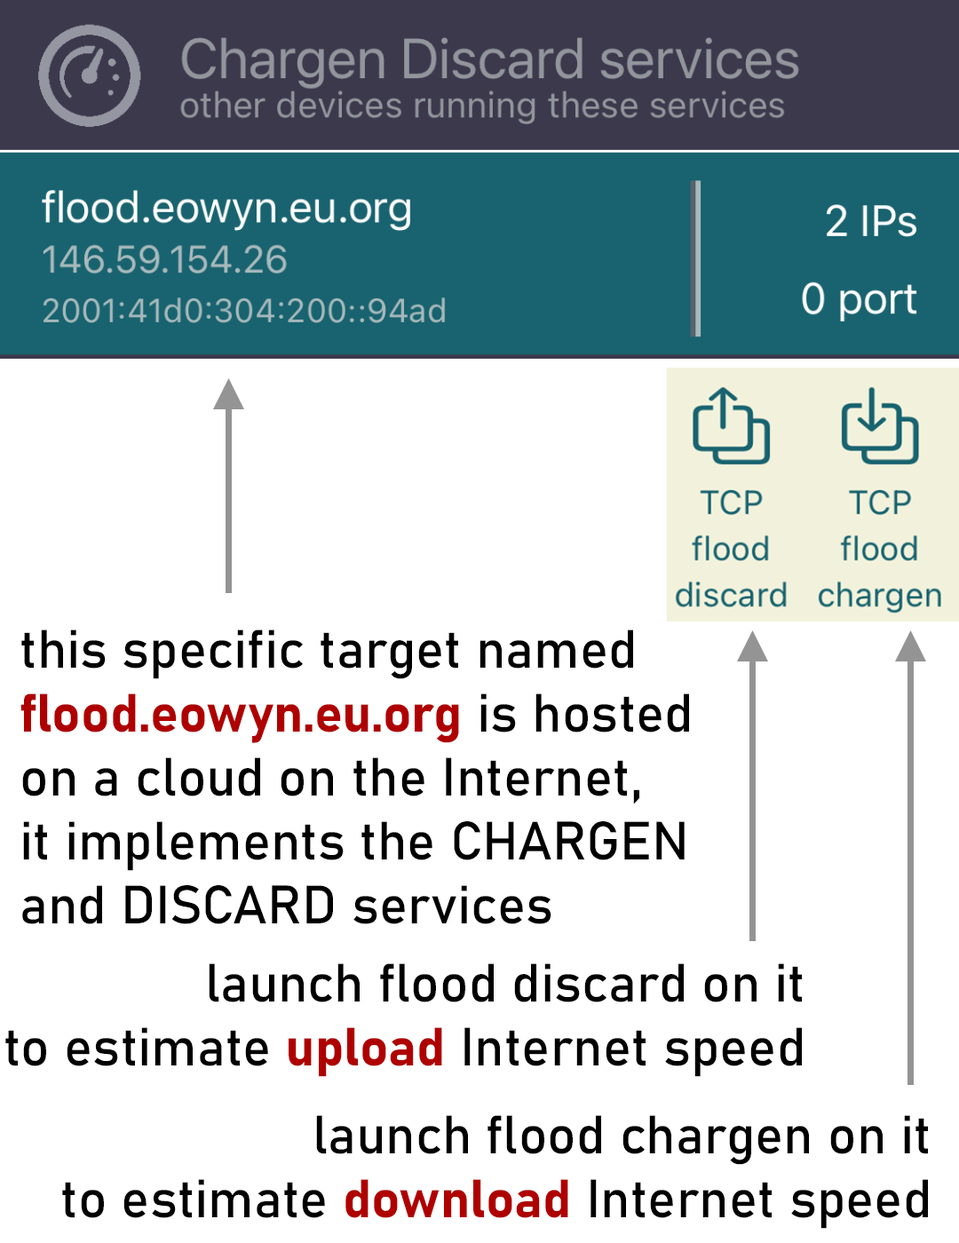
<style>
.page{position:relative;width:959px;height:1243px;background:#ffffff}
.page>*{position:absolute;margin:0}
.t1{font:53.3px "Bahnschrift";color:#000000}
.t2{font:53.3px "Bahnschrift-Bold";color:#af0000}
</style>
<div class="page">
<p class="t1" style="left:20px;top:630px;width:669px;height:294px">this specific target named <br><span class="t2">flood.eowyn.eu.org </span>is hosted<br>on a cloud on the Internet,<br>it implements the CHARGEN<br>and DISCARD services</p>
<p class="t1" style="left:5px;top:964px;width:797px;height:113px;text-align:right">launch flood discard on it<br>to estimate <span class="t2">upload </span>Internet speed</p>
<p class="t1" style="left:62px;top:1115px;width:866px;height:114px;text-align:right">launch flood chargen on it<br>to estimate <span class="t2">download </span>Internet speed</p>
</div>
